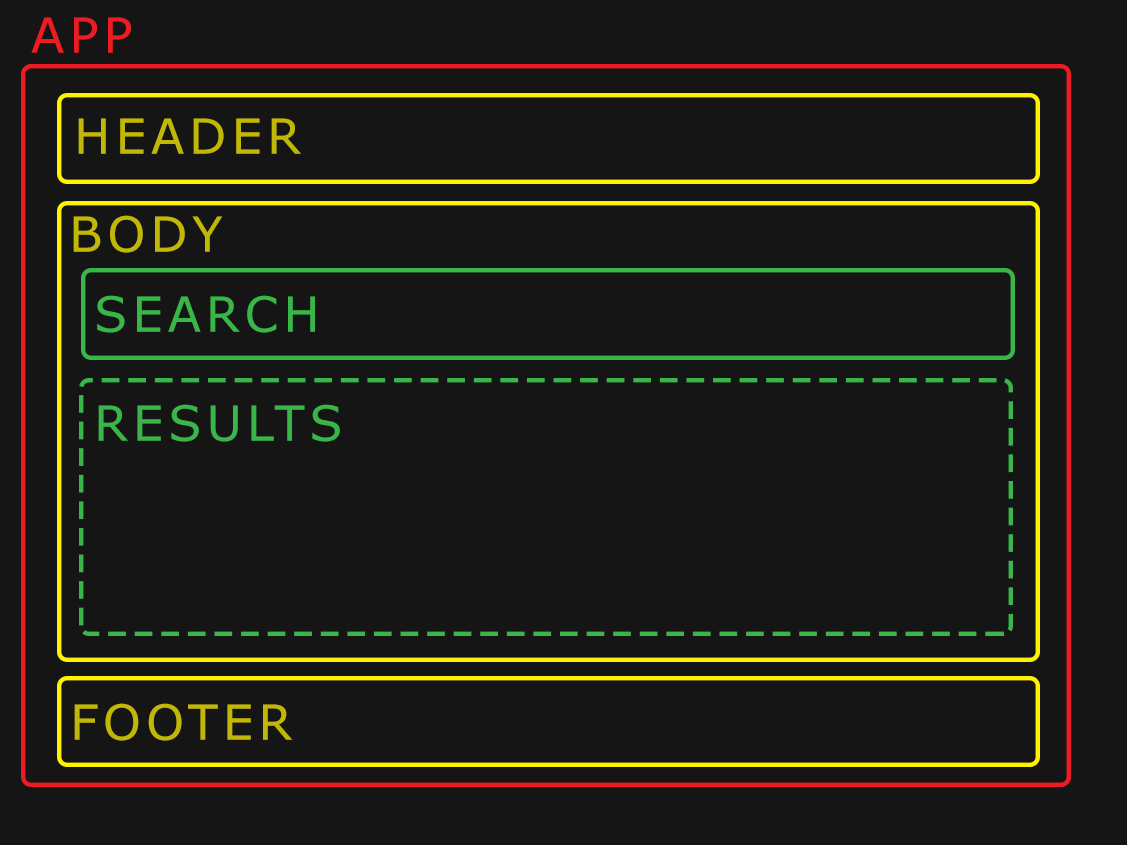
<style>
.page{position:relative;width:1127px;height:845px;background:#151515}
.page>*{position:absolute;margin:0}
.t1{font:83.4px "Verdana";letter-spacing:0.1em;color:#ed1c24}
.t2{font:83.4px "Verdana";letter-spacing:0.1em;color:#c1b706}
.t3{font:83.4px "Verdana";letter-spacing:0.1em;color:#39b54a}
</style>
<div class="page">
<p class="t1" style="left:31px;top:17px;width:100px;height:36px">APP</p>
<p class="t2" style="left:78px;top:118px;width:223px;height:36px">HEADER</p>
<p class="t2" style="left:73px;top:215px;width:150px;height:38px">BODY</p>
<p class="t3" style="left:97px;top:295px;width:218px;height:38px">SEARCH</p>
<p class="t3" style="left:98px;top:404px;width:242px;height:38px">RESULTS</p>
<p class="t2" style="left:74px;top:703px;width:219px;height:38px">FOOTER</p>
</div>
